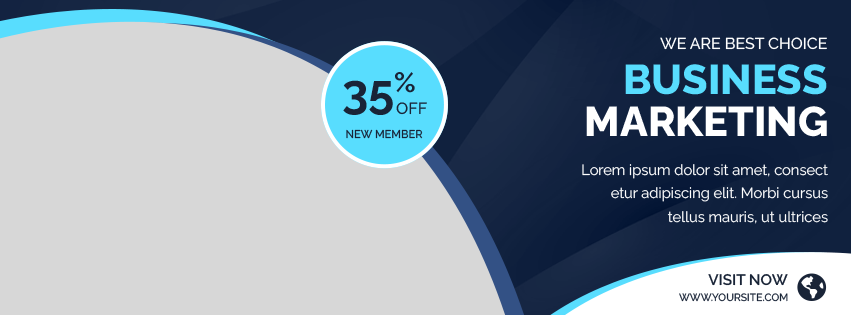
<style>
.page{position:relative;width:851px;height:315px;background:#d7d7d7}
.page>*{position:absolute;margin:0}
.t1{font:15.9px "Raleway-Medium";color:#ffffff}
.t2{font:41.4px "Raleway-ExtraBold";color:#58ddfe}
.t3{font:47.6px "Raleway-Bold";color:#192437}
.t4{font:16.3px "Raleway-Medium";color:#192437}
.t5{font:41.4px "Raleway-ExtraBold";color:#ffffff}
.t6{font:11.2px "Raleway-Medium";color:#192437}
.t7{font:14.6px/23.6px "Raleway-Regular";color:#ffffff}
.t8{font:15.3px "Raleway-SemiBold";color:#192437}
.t9{font:10.4px "Raleway-Medium";color:#192437}
</style>
<div class="page">
<p class="t1" style="left:660px;top:37px;width:167px;height:13px">WE ARE BEST CHOICE</p>
<p class="t2" style="left:625px;top:64px;width:202px;height:31px">BUSINESS</p>
<p class="t3" style="left:343px;top:72px;width:72px;height:43px">35%</p>
<p class="t4" style="left:396px;top:102px;width:31px;height:13px">OFF</p>
<p class="t5" style="left:586px;top:106px;width:241px;height:31px">MARKETING</p>
<p class="t6" style="left:346px;top:129px;width:77px;height:10px">NEW MEMBER</p>
<p class="t7" style="left:582px;top:164px;width:246px;height:60px;text-align:right">Lorem ipsum dolor sit amet, consect etur adipiscing elit. Morbi cursus tellus mauris, ut ultrices</p>
<p class="t8" style="left:708px;top:273px;width:80px;height:13px">VISIT NOW</p>
<p class="t9" style="left:679px;top:293px;width:109px;height:9px">WWW.YOURSITE.COM</p>
</div>
